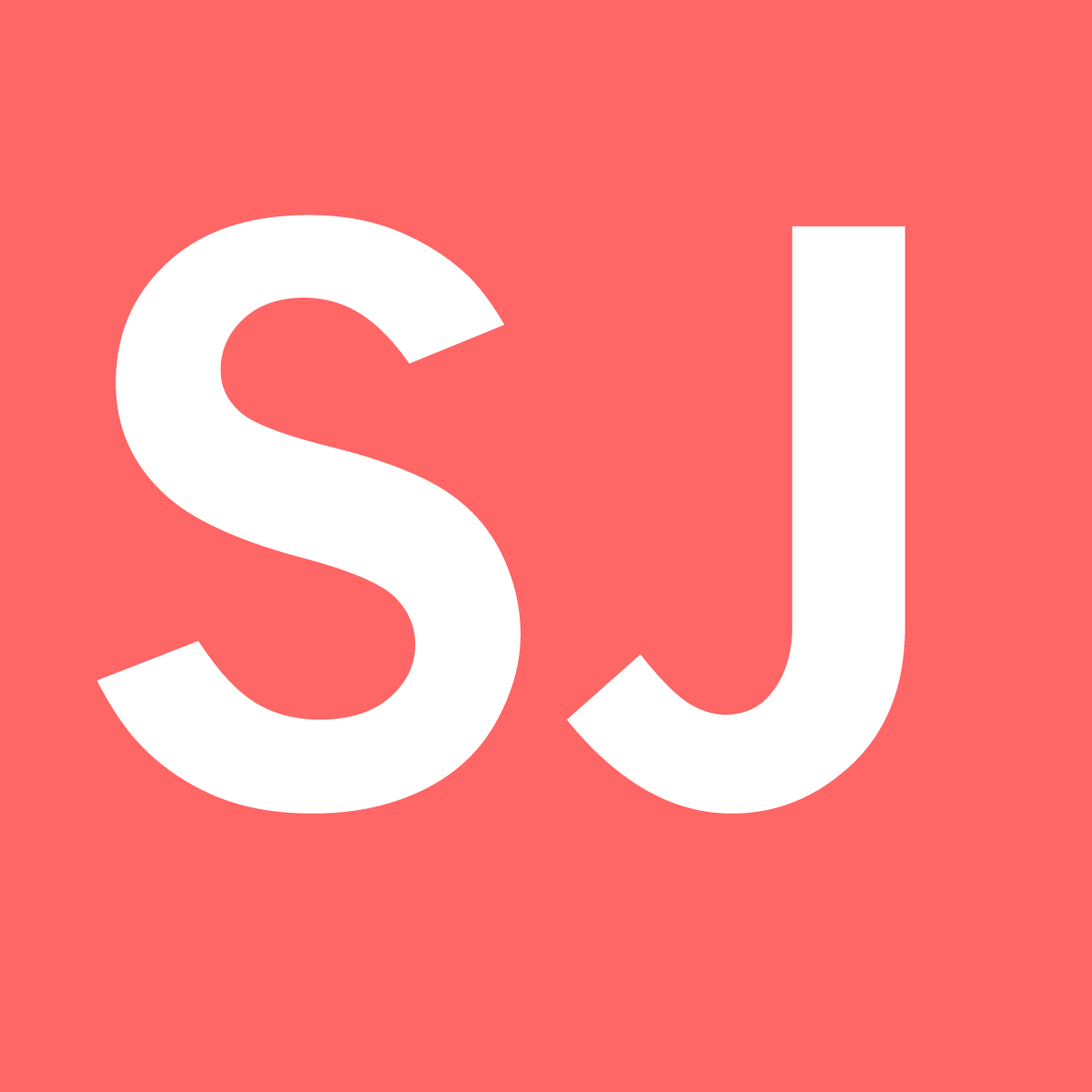
<style>
.page{position:relative;width:1092px;height:1092px;background:#ff6666}
.page>*{position:absolute;margin:0}
.t1{font:770.5px "NewsGothicMT-Bold";color:#ffffff}
</style>
<div class="page">
<p class="t1" style="left:97px;top:215px;width:808px;height:599px">SJ</p>
</div>
